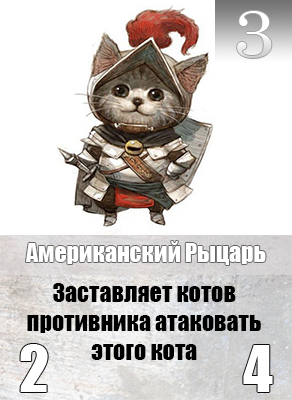
<style>
.page{position:relative;width:292px;height:400px;background:#ffffff}
.page>*{position:absolute;margin:0}
.t1{font:65.6px "Century";color:#ffffff;scale:1.18 1}
.t2{font:24px "Impact";color:#ffffff}
.t3{font:24px "Impact";color:#000000}
</style>
<div class="page">
<p class="t1" style="left:237px;top:11px;width:35px;height:47px">3</p>
<p class="t2" style="left:26px;top:241px;width:240px;height:24px">Американский Рыцарь</p>
<p class="t3" style="left:27px;top:283px;width:234px;height:77px;text-align:center">Заставляет котов противника атаковать этого кота</p>
</div>
